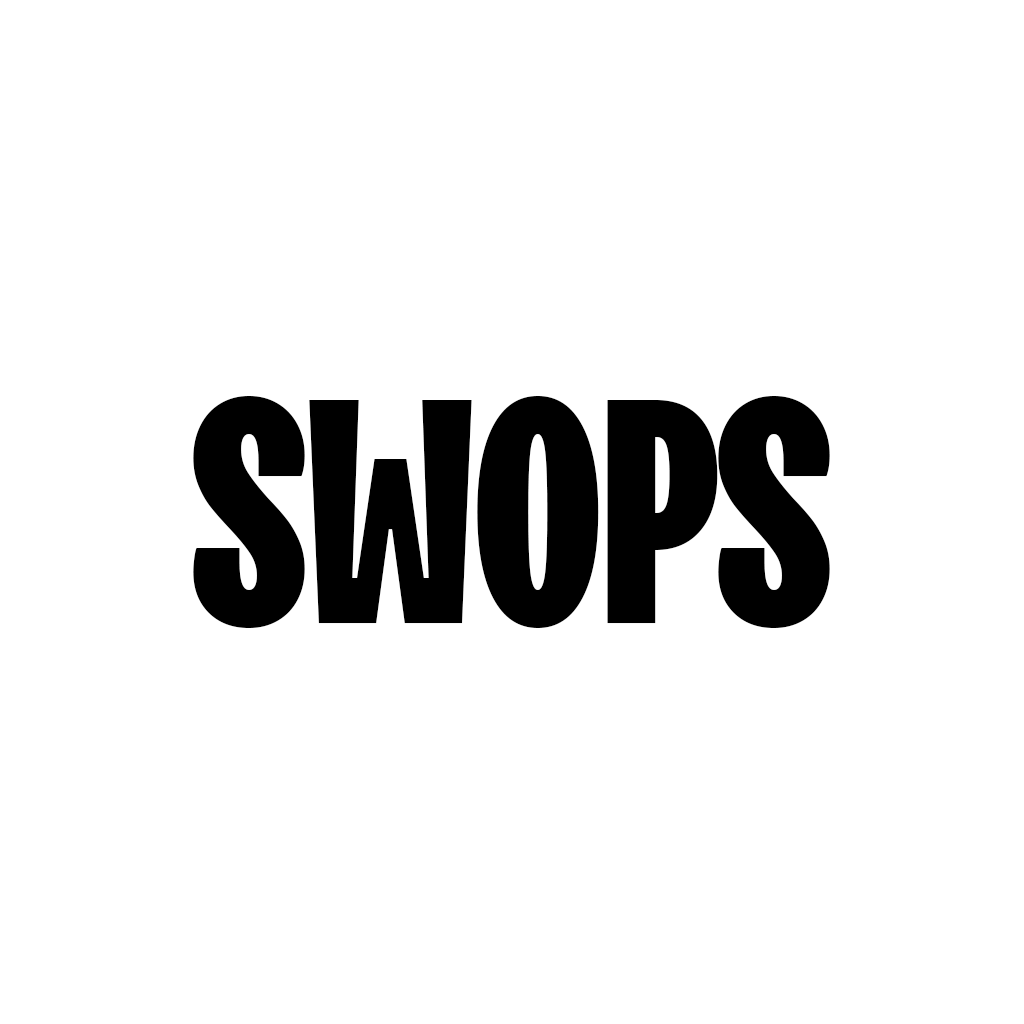
<style>
.page{position:relative;width:1024px;height:1024px;background:#ffffff}
.page>*{position:absolute;margin:0}
.t1{font:317.5px "TTTrailersTrial-Blk";letter-spacing:-0.02em;color:#000000}
</style>
<div class="page">
<p class="t1" style="left:193px;top:396px;width:637px;height:232px">SWOPS</p>
</div>
